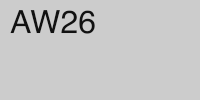
<style>
.page{position:relative;width:200px;height:100px;background:#cccccc}
.page>*{position:absolute;margin:0}
.t1{font:32px "Helvetica";color:#111111}
</style>
<div class="page">
<p class="t1" style="left:9px;top:10px;width:87px;height:25px">AW26</p>
</div>
